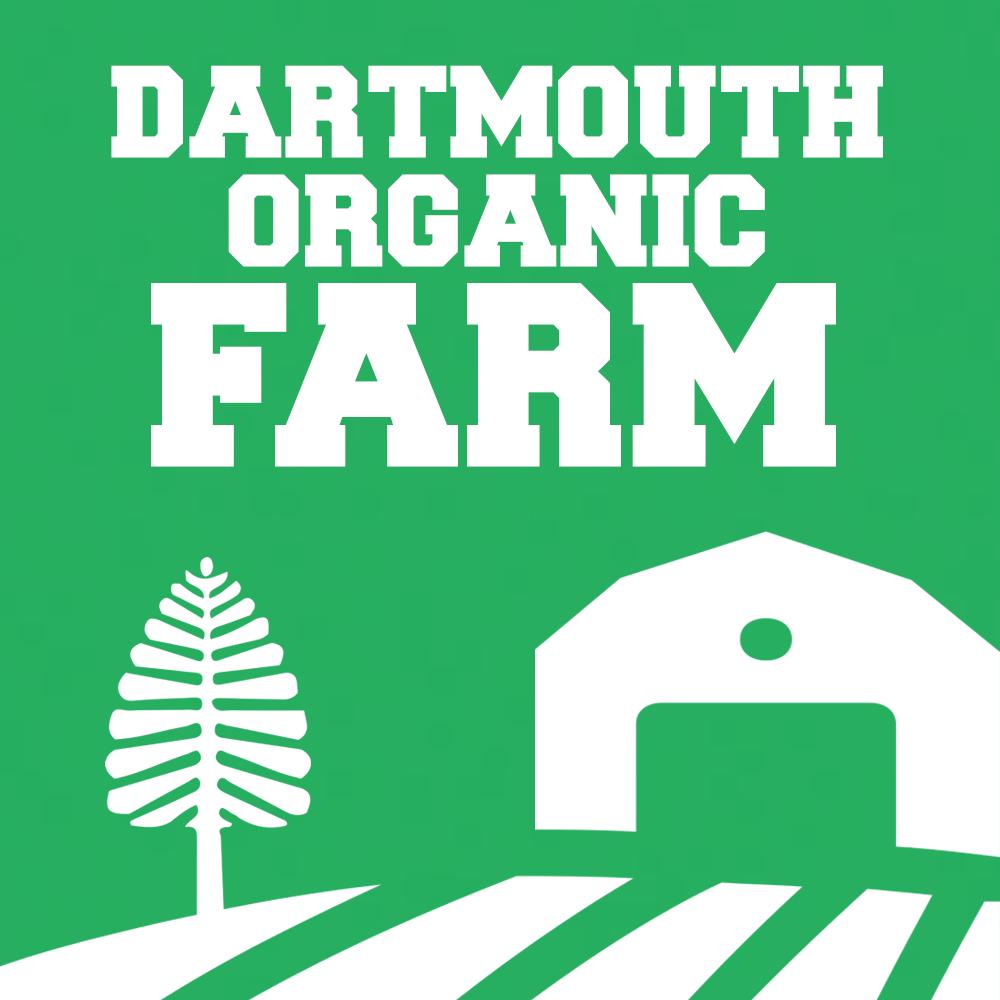
<style>
.page{position:relative;width:1000px;height:1000px;background:#ffffff}
.page>*{position:absolute;margin:0}
.t1{font:110px "Freshman";color:#ffffff}
.t2{font:220px "Freshman";color:#ffffff}
</style>
<div class="page">
<p class="t1" style="left:111px;top:65px;width:772px;height:93px">DARTMOUTH</p>
<p class="t1" style="left:228px;top:174px;width:537px;height:93px">ORGANIC</p>
<p class="t2" style="left:151px;top:283px;width:685px;height:184px">FARM</p>
</div>
